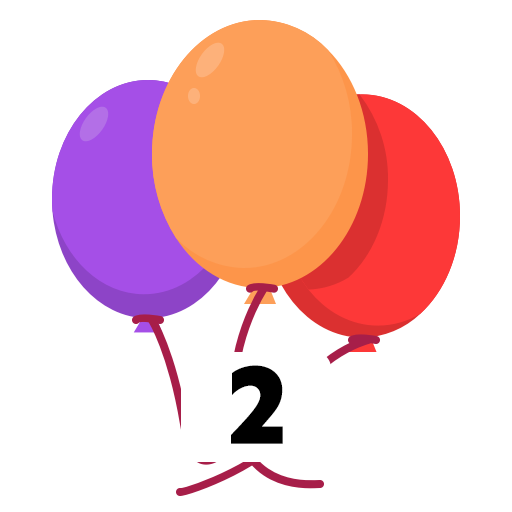
<style>
.page{position:relative;width:512px;height:512px;background:#ffffff}
.page>*{position:absolute;margin:0}
.t1{font:116.4px "Sen-ExtraBold";letter-spacing:-0.075em;color:#000000}
</style>
<div class="page">
<p class="t1" style="left:231px;top:365px;width:52px;height:79px">2</p>
</div>
